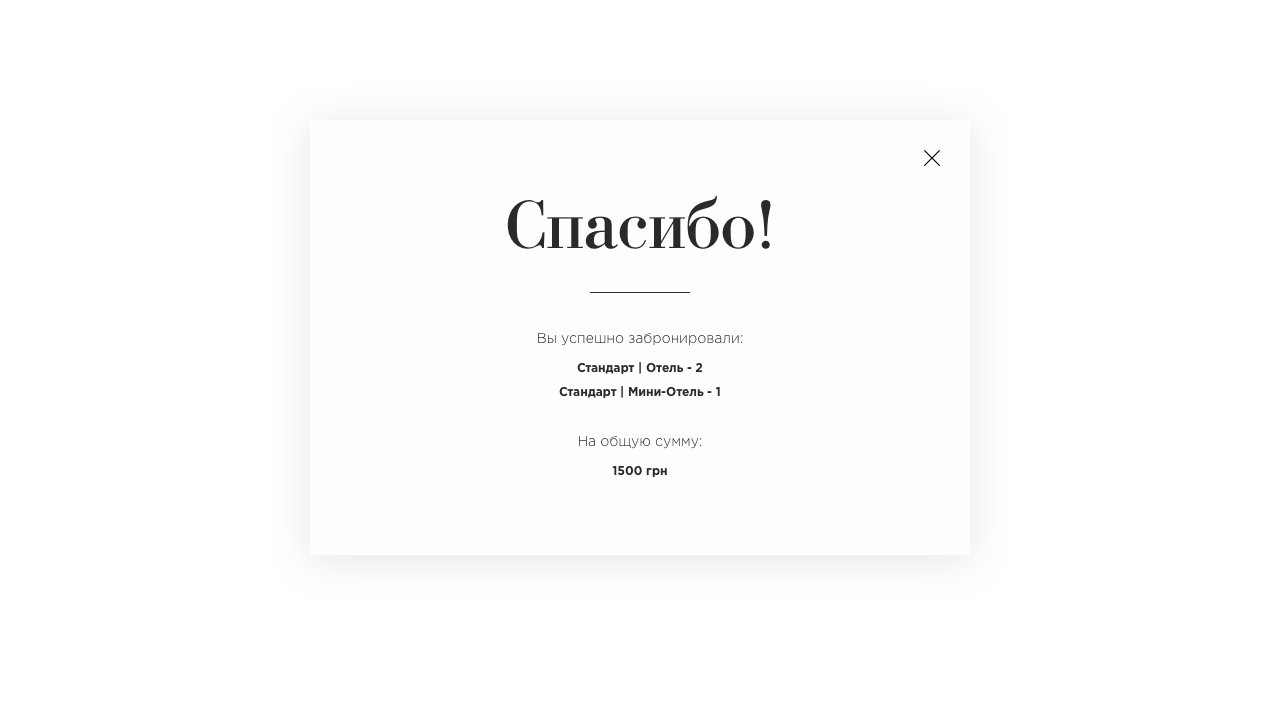
<style>
.page{position:relative;width:1280px;height:701px;background:#ffffff}
.page>*{position:absolute;margin:0}
.t1{font:72px "BodoniCyrillic";color:#2a2a2a}
.t2{font:14px "GothamPro-Light"}
.t3{font:12px/24px "GothamPro-Bold";color:#2a2a2a}
.t4{font:12px "GothamPro-Bold";color:#2a2a2a}
</style>
<div class="page">
<p class="t1" style="left:507px;top:195px;width:264px;height:54px">Спасибо!</p>
<p class="t2" style="left:538px;top:333px;width:205px;height:13px">Вы успешно забронировали:</p>
<p class="t3" style="left:559px;top:362px;width:161px;height:36px;text-align:center">Стандарт | Отель - 2 <br>Стандарт | Мини-Отель - 1</p>
<p class="t2" style="left:579px;top:436px;width:123px;height:13px">На общую сумму:</p>
<p class="t4" style="left:612px;top:465px;width:55px;height:12px">1500 грн</p>
</div>
